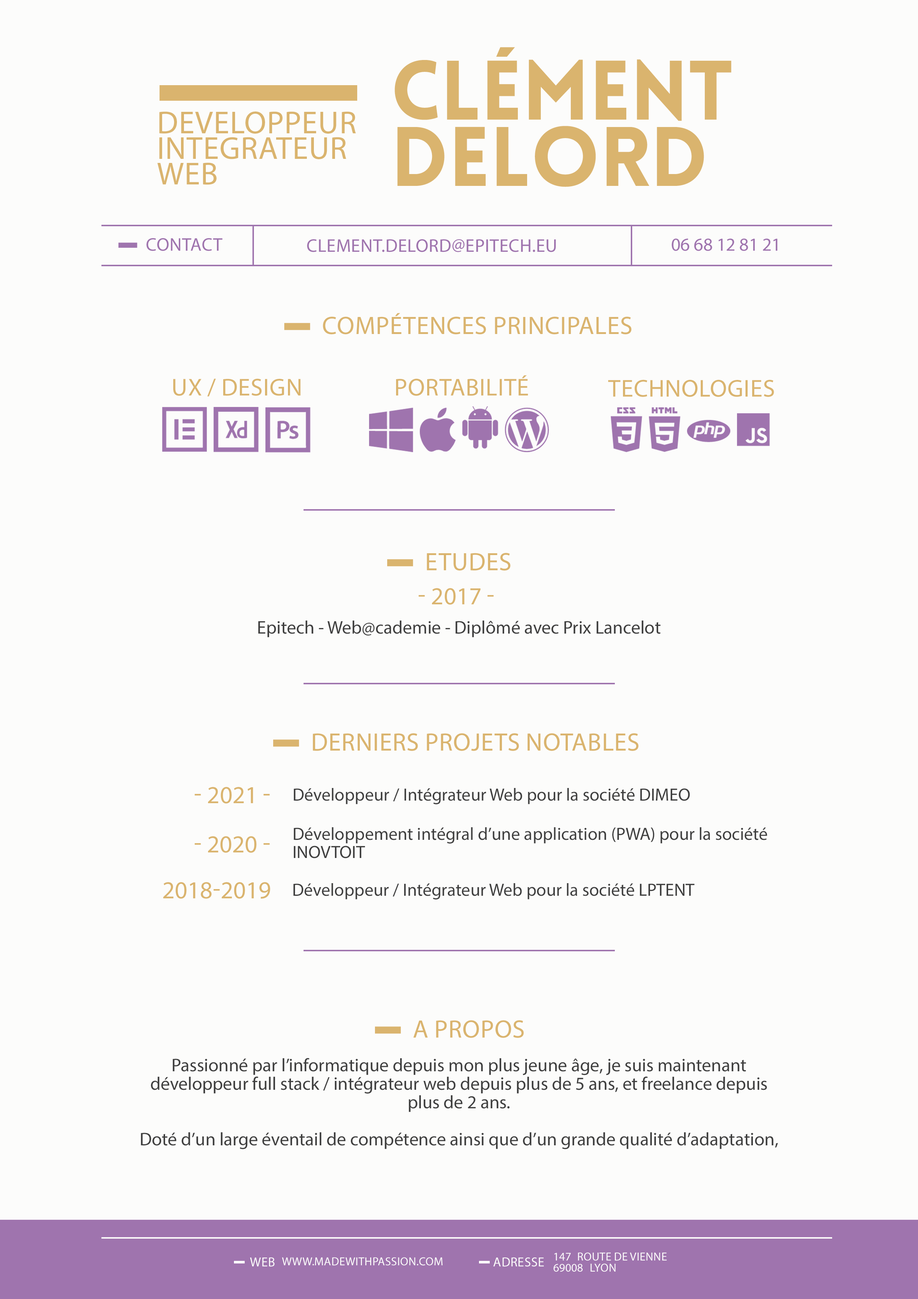
<style>
.page{position:relative;width:918px;height:1299px;background:#fcfcfb}
.page>*{position:absolute;margin:0}
.t1{font:82.3px/66.2px "LoveloBlack";color:#dab46e;text-transform:uppercase}
.t2{font:31.8px/25.6px "MyriadPro-Regular";color:#dab46e;text-transform:uppercase}
.t3{font:18.4px "MyriadPro-Regular";color:#9f74ae;text-transform:uppercase}
.t4{font:25.3px "MyriadPro-Regular";color:#dab46e;text-transform:uppercase}
.t5{font:24.4px "MyriadPro-Regular";color:#dab46e;text-transform:uppercase}
.t6{font:18.4px "MyriadPro-Regular";color:#3f3f3f}
.t7{font:17.8px "MyriadPro-Regular";color:#3f3f3f}
.t8{font:17.8px/17.9px "MyriadPro-Regular";color:#3f3f3f}
.t9{font:18.4px/18.5px "MyriadPro-Regular";color:#3f3f3f}
.t10{font:11.6px "MyriadPro-Regular";color:#ffffff;text-transform:uppercase}
.t11{font:13.1px "MyriadPro-Regular";color:#fcfcfb;text-transform:uppercase}
.t12{font:11.6px "MyriadPro-Regular";color:#fcfcfb;text-transform:uppercase}
</style>
<div class="page">
<p class="t1" style="left:395px;top:47px;width:337px;height:140px;text-align:right">clément<br>DELORD</p>
<p class="t2" style="left:157px;top:111px;width:199px;height:74px;text-align:right">DEVELOPPEUR<br>INTEGRATEUR<br>web</p>
<p class="t3" style="left:146px;top:238px;width:77px;height:13px">contact</p>
<p class="t3" style="left:307px;top:239px;width:249px;height:13px">clement.delord@epitech.eu</p>
<p class="t3" style="left:672px;top:238px;width:105px;height:13px">06 68 12 81 21</p>
<p class="t4" style="left:323px;top:313px;width:309px;height:21px">COMPétences principales</p>
<p class="t5" style="left:396px;top:375px;width:132px;height:21px">PORTABILITé</p>
<p class="t5" style="left:173px;top:378px;width:128px;height:19px">UX / DESIGN</p>
<p class="t5" style="left:608px;top:379px;width:166px;height:18px">TECHNOLOGIES</p>
<p class="t4" style="left:427px;top:553px;width:84px;height:18px">ETUDES</p>
<p class="t5" style="left:419px;top:588px;width:75px;height:17px">- 2017 -</p>
<p class="t6" style="left:258px;top:620px;width:403px;height:17px">Epitech - Web@cademie - Diplômé avec Prix Lancelot</p>
<p class="t4" style="left:313px;top:733px;width:326px;height:18px">DERNIERS PROJETS NOTABLES</p>
<p class="t5" style="left:195px;top:787px;width:75px;height:16px">- 2021 -</p>
<p class="t7" style="left:294px;top:788px;width:396px;height:16px">Développeur / Intégrateur Web pour la société DIMEO</p>
<p class="t8" style="left:294px;top:827px;width:473px;height:31px">Développement intégral d’une application (PWA) pour la société INOVTOIT</p>
<p class="t5" style="left:195px;top:836px;width:75px;height:17px">- 2020 -</p>
<p class="t5" style="left:163px;top:882px;width:107px;height:17px">2018-2019</p>
<p class="t7" style="left:293px;top:883px;width:402px;height:16px">Développeur / Intégrateur Web pour la société LPTENT</p>
<p class="t4" style="left:413px;top:1020px;width:111px;height:18px">A propos</p>
<p class="t9" style="left:141px;top:1058px;width:637px;height:91px;text-align:center">Passionné par l’informatique depuis mon plus jeune âge, je suis maintenant développeur full stack / intégrateur web depuis plus de 5 ans, et freelance depuis plus de 2 ans.<br><br>Doté d’un large éventail de compétence ainsi que d’un grande qualité d’adaptation, j’aime travailler sur des projets de nature et d’ampleur variées.</p>
<p class="t10" style="left:554px;top:1252px;width:17px;height:8px">147</p>
<p class="t10" style="left:578px;top:1252px;width:89px;height:9px">ROUTE DE VIENNE</p>
<p class="t11" style="left:250px;top:1257px;width:25px;height:10px">web</p>
<p class="t12" style="left:282px;top:1257px;width:161px;height:8px">www.madewithpassion.com</p>
<p class="t11" style="left:493px;top:1257px;width:51px;height:10px">adresse</p>
<p class="t10" style="left:553px;top:1264px;width:30px;height:8px">69008</p>
<p class="t10" style="left:591px;top:1263px;width:25px;height:9px">LYON</p>
</div>
